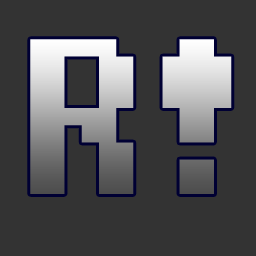
<style>
.page{position:relative;width:256px;height:256px;background:#333333}
.page>*{position:absolute;margin:0}
.t1{font:220px "Fixedsys"}
</style>
<div class="page">
<p class="t1" style="left:30px;top:39px;width:104px;height:155px">R</p>
<p class="t1" style="left:162px;top:39px;width:70px;height:155px">!</p>
</div>
